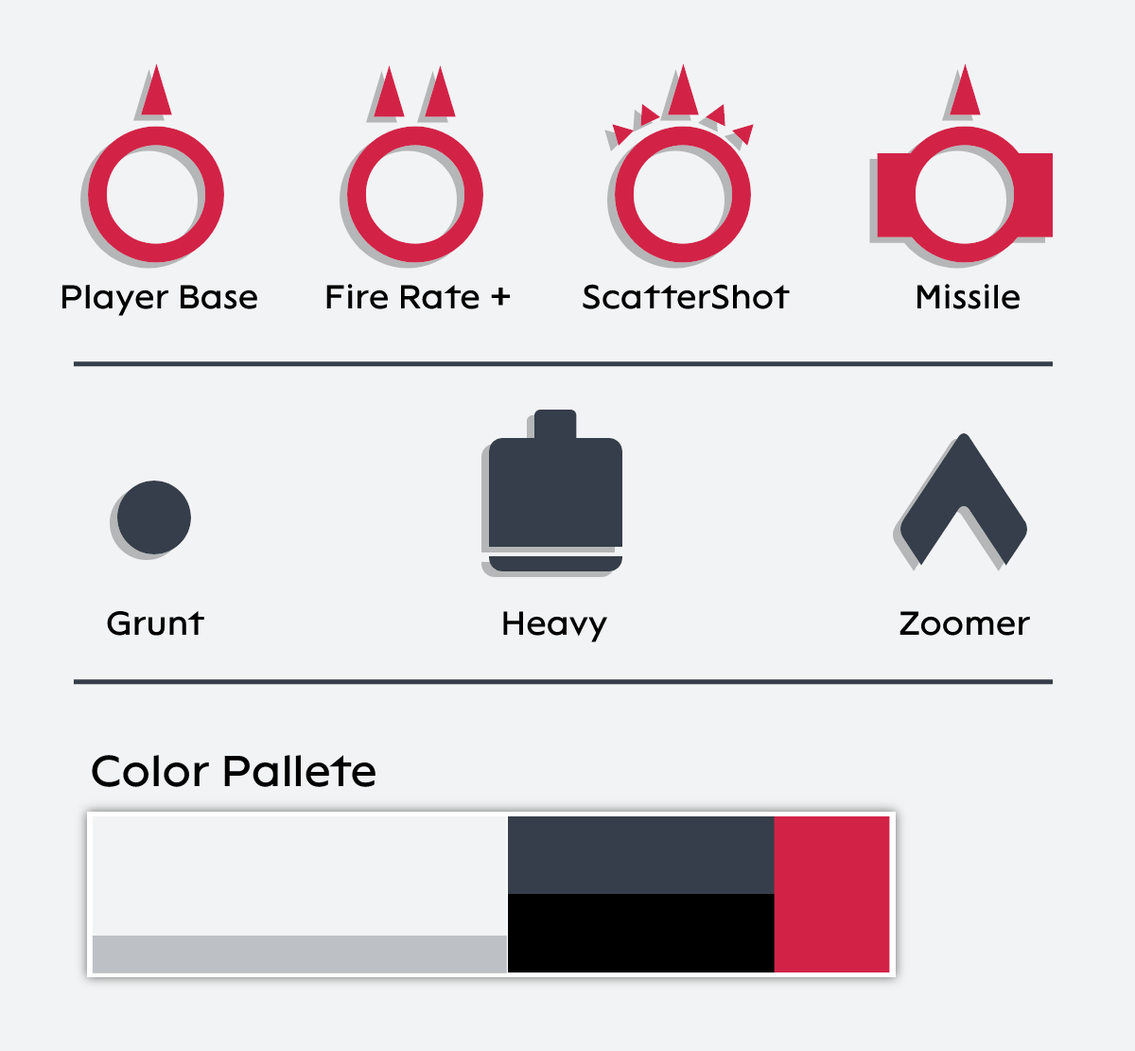
<style>
.page{position:relative;width:1135px;height:1051px;background:#f2f3f4}
.page>*{position:absolute;margin:0}
.t1{font:34px "Lack-Regular";color:#000000}
.t2{font:44.5px "Lack-Regular";color:#000000}
</style>
<div class="page">
<p class="t1" style="left:61px;top:284px;width:196px;height:32px">Player Base</p>
<p class="t1" style="left:326px;top:284px;width:184px;height:25px">Fire Rate +</p>
<p class="t1" style="left:583px;top:284px;width:207px;height:25px">ScatterShot</p>
<p class="t1" style="left:916px;top:284px;width:104px;height:25px">Missile</p>
<p class="t1" style="left:107px;top:611px;width:97px;height:25px">Grunt</p>
<p class="t1" style="left:503px;top:611px;width:104px;height:31px">Heavy</p>
<p class="t1" style="left:899px;top:611px;width:131px;height:25px">Zoomer</p>
<p class="t2" style="left:92px;top:755px;width:283px;height:32px">Color Pallete</p>
</div>
